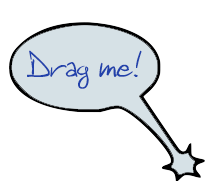
<style>
.page{position:relative;width:208px;height:181px;background:#ffffff}
.page>*{position:absolute;margin:0}
.t1{font:34.2px "DaghiHandwriting";color:#2242ab;scale:1.05 1}
</style>
<div class="page">
<p class="t1" style="left:27px;top:50px;width:115px;height:39px">Drag me!</p>
</div>
